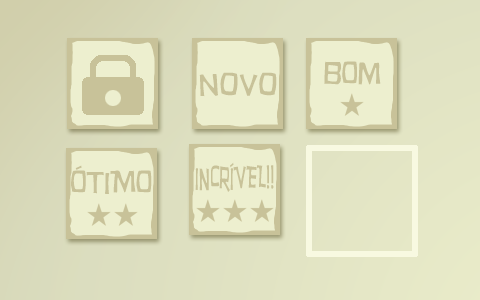
<style>
.page{position:relative;width:480px;height:300px}
.page>*{position:absolute;margin:0}
.t1{font:29px "HurryUp-Regular";color:#c8c299}
.t2{font:29.9px "HurryUp-Regular";color:#c8c299;scale:0.56 1}
</style>
<div class="page">
<p class="t1" style="left:324px;top:61px;width:57px;height:24px">bOm</p>
<p class="t1" style="left:199px;top:72px;width:78px;height:25px">novo</p>
<p class="t1" style="left:71px;top:165px;width:81px;height:29px">ÓTIMO</p>
<p class="t2" style="left:195px;top:162px;width:79px;height:30px">INCRÍVEL!!</p>
</div>
